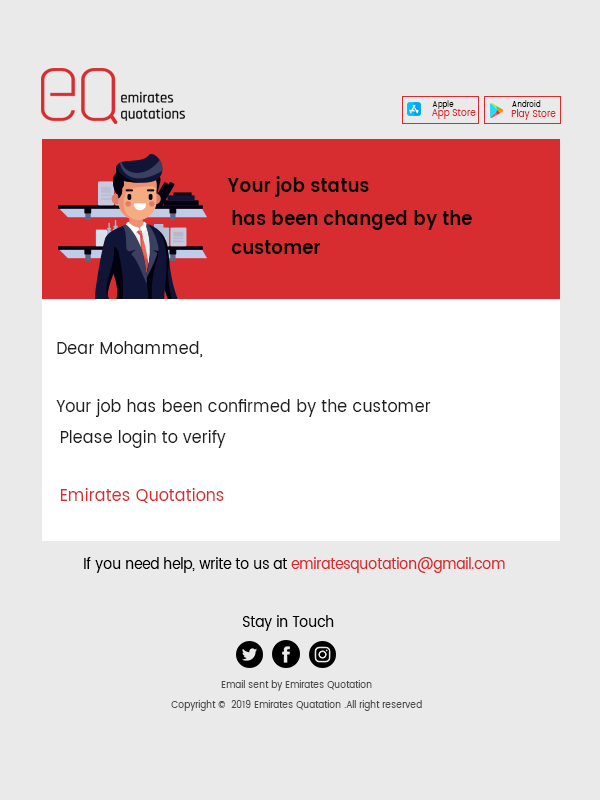
<style>
.page{position:relative;width:600px;height:800px;background:#eaeaea}
.page>*{position:absolute;margin:0}
.t1{font:8px "Poppins-Regular";color:#000000;scale:0.91 1}
.t2{font:10px "Poppins-Regular";color:#d72d30;scale:0.91 1}
.t3{font:20px "Poppins-SemiBold";color:#000000;scale:0.91 1}
.t4{font:20px/29px "Poppins-SemiBold";color:#000000;scale:0.91 1}
.t5{font:18px/29px "Poppins-Regular";color:#1e1e1e;scale:0.91 1}
.t6{font:18px/29px "Poppins-Regular";color:#d72d30;scale:0.91 1}
.t7{font:15px "Poppins-Regular";color:#000000;scale:0.91 1}
.t8{font:15px "Poppins-Regular";color:#d72d30;scale:0.91 1}
.t9{font:10px/20px "Poppins-Regular";color:#4b4b4b;scale:0.91 1}
</style>
<div class="page">
<p class="t1" style="left:432px;top:100px;width:22px;height:9px">Apple</p>
<p class="t1" style="left:512px;top:100px;width:29px;height:7px">Android</p>
<p class="t2" style="left:432px;top:109px;width:44px;height:10px">App Store</p>
<p class="t2" style="left:511px;top:109px;width:45px;height:11px">Play Store</p>
<p class="t3" style="left:227px;top:176px;width:142px;height:21px">Your job status</p>
<p class="t4" style="left:231px;top:210px;width:241px;height:44px">has been changed by the <br> customer</p>
<p class="t5" style="left:56px;top:341px;width:375px;height:76px">Dear Mohammed,<br><br>Your job has been confirmed by the customer</p>
<p class="t5" style="left:60px;top:430px;width:166px;height:73px">Please login to verify<br><span class="t6"><br>Emirates Quotations</span></p>
<p class="t7" style="left:84px;top:557px;width:421px;height:16px">If you need help, write to us at<span class="t8"> emiratesquotation@gmail.com</span></p>
<p class="t7" style="left:243px;top:615px;width:91px;height:16px">Stay in Touch</p>
<p class="t9" style="left:171px;top:680px;width:251px;height:31px;text-align:center">Email sent by Emirates Quotation<br>Copyright ©  2019 Emirates Quatation .All right reserved</p>
</div>
